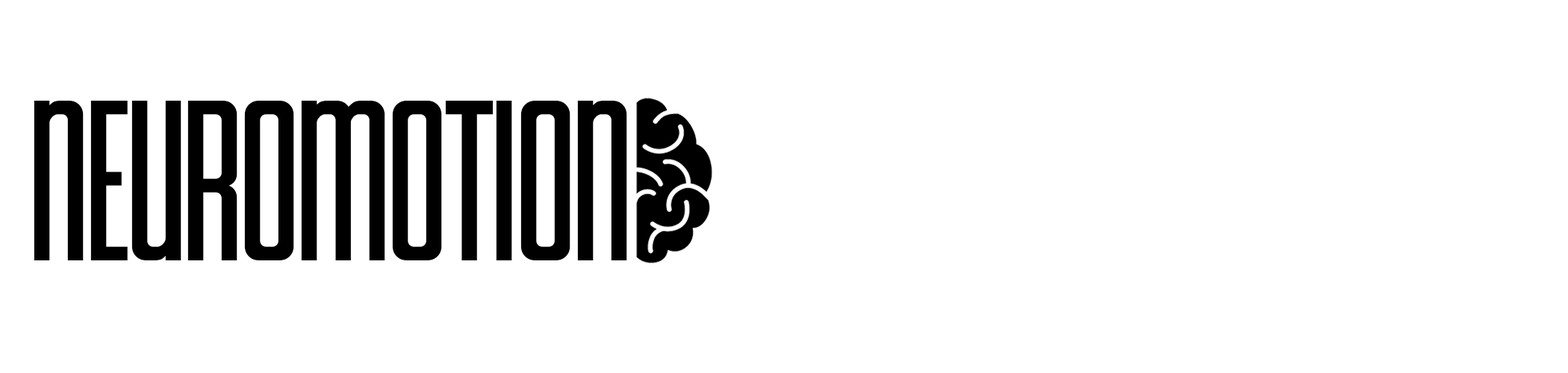
<style>
.page{position:relative;width:1568px;height:373px;background:#ffffff}
.page>*{position:absolute;margin:0}
.t1{font:228.3px "Goodland-Compressed";letter-spacing:-0.05em;color:#000000;font-weight:bold}
</style>
<div class="page">
<p class="t1" style="left:34px;top:100px;width:593px;height:161px">NEUROMOTION</p>
</div>
